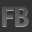
<style>
.page{position:relative;width:32px;height:32px;background:#333333}
.page>*{position:absolute;margin:0}
.t1{font:28px "HelveticaNeue-CondensedBold";color:#585858}
</style>
<div class="page">
<p class="t1" style="left:2px;top:6px;width:27px;height:20px">FB</p>
</div>
